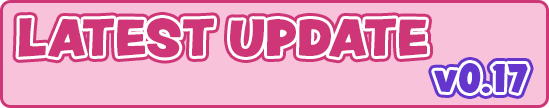
<style>
.page{position:relative;width:549px;height:108px;background:#f8c3da}
.page>*{position:absolute;margin:0}
.t1{font:55.7px "PeachyKeenJF";color:#ce3677}
.t2{font:42.8px "PeachyKeenJF";color:#6436ce}
</style>
<div class="page">
<p class="t1" style="left:18px;top:18px;width:410px;height:40px">LATEST UPDATE</p>
<p class="t2" style="left:434px;top:63px;width:94px;height:30px">v0.17</p>
</div>
